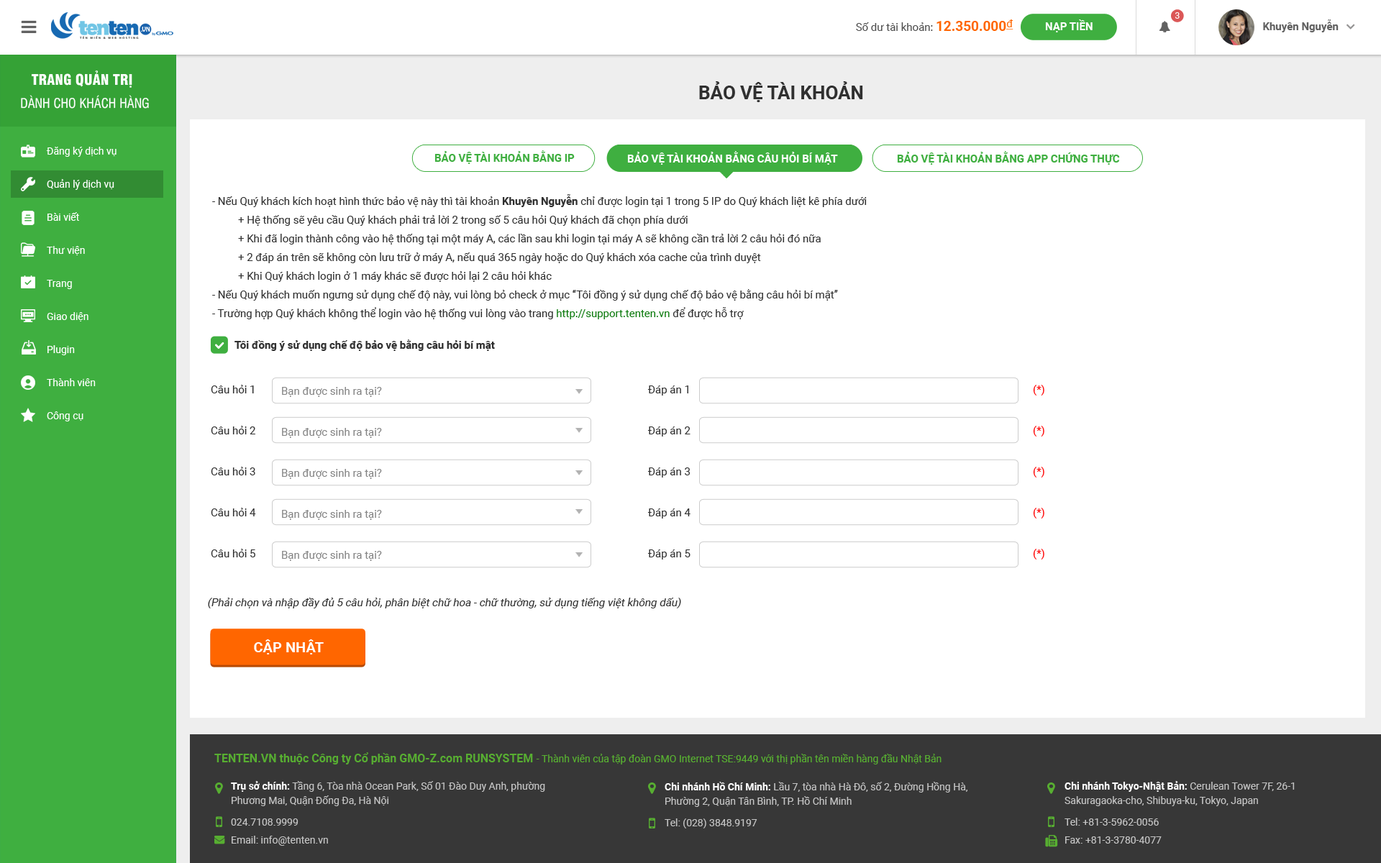
<style>
.page{position:relative;width:1381px;height:863px;background:#ffffff}
.page>*{position:absolute;margin:0}
.t1{font:8.6px "Roboto-Regular";color:#ffffff;text-transform:uppercase}
.t2{font:10.8px "Roboto-Regular";color:#4e4e4e}
.t3{font:13.7px "Roboto-Bold";color:#ff6600}
.t4{font:10.8px "Roboto-Regular";color:#ff6600;text-decoration:underline}
.t5{font:10.8px "Roboto-Bold";color:#ffffff}
.t6{font:10.8px "Roboto-Bold";color:#616161}
.t7{font:14.4px "UTM-Swiss-721-Black-Condensed";color:#ffffff;text-transform:uppercase}
.t8{font:18.7px "Roboto-Bold";color:#303030;text-transform:uppercase}
.t9{font:12.9px "UTM-Swiss-Condensed";color:#ffffff;text-transform:uppercase}
.t10{font:10.1px/33.1px "Roboto-Regular";color:#ffffff}
.t11{font:10.8px "Roboto-Bold";color:#3faf40;text-transform:uppercase}
.t12{font:10.8px "Roboto-Bold";color:#ffffff;text-transform:uppercase}
.t13{font:10.8px/18.7px "Roboto-Regular";color:#303030}
.t14{font:10.8px/18.7px "Roboto-Bold";color:#303030}
.t15{font:10.8px/18.7px "Roboto-Regular";color:#0e7b0f}
.t16{font:10.8px "Roboto-Bold";color:#303030}
.t17{font:10.8px/41px "Roboto-Regular";color:#303030}
.t18{font:10.8px/41px "Roboto-Regular";color:#848484}
.t19{font:10.8px/41px "Roboto-Regular";color:#ff0000}
.t20{font:10.8px "Roboto-Regular";color:#303030;font-style:italic}
.t21{font:14.4px "Roboto-Bold";color:#ffffff;text-transform:uppercase}
.t22{font:10.1px "Roboto-Regular";color:#57ae31}
.t23{font:11.5px "Roboto-Bold";color:#57ae31}
.t24{font:10.1px/14.4px "Roboto-Regular";color:#c4c4c4}
.t25{font:10.1px/14.4px "Roboto-Bold";color:#ffffff}
.t26{font:10.1px/21.6px "Roboto-Regular";color:#c4c4c4}
.t27{font:10.1px/18px "Roboto-Regular";color:#c4c4c4}
</style>
<div class="page">
<p class="t1" style="left:1175px;top:12px;width:5px;height:7px">3</p>
<p class="t2" style="left:856px;top:19px;width:158px;height:12px">Số dư tài khoản: <span class="t3">12.350.000</span><span class="t4">đ</span></p>
<p class="t5" style="left:1045px;top:19px;width:48px;height:13px">NẠP TIỀN</p>
<p class="t6" style="left:1263px;top:19px;width:76px;height:13px">Khuyên Nguyễn</p>
<p class="t7" style="left:32px;top:71px;width:100px;height:17px">Trang quản trị</p>
<p class="t8" style="left:699px;top:81px;width:164px;height:21px">bảo vệ tài khoản</p>
<p class="t9" style="left:21px;top:95px;width:128px;height:14px">Dành cho Khách hàng</p>
<p class="t10" style="left:46px;top:147px;width:71px;height:275px">Đăng ký dịch vụ<br>Quản lý dịch vụ<br>Bài viết<br>Thư viện<br>Trang<br>Giao diện<br>Plugin<br>Thành viên<br>Công cụ</p>
<p class="t11" style="left:435px;top:150px;width:140px;height:14px">bảo vệ tài khoản bằng ip</p>
<p class="t12" style="left:627px;top:151px;width:211px;height:14px">bảo vệ tài khoản bằng câu hỏi bí mật</p>
<p class="t11" style="left:897px;top:151px;width:223px;height:14px">bảo vệ tài khoản bằng app chứng thực</p>
<p class="t13" style="left:212px;top:194px;width:655px;height:125px">- Nếu Quý khách kích hoạt hình thức bảo vệ này thì tài khoản <span class="t14">Khuyên Nguyễn</span> chỉ được login tại 1 trong 5 IP do Quý khách liệt kê phía dưới<br> + Hệ thống sẽ yêu cầu Quý khách phải trả lời 2 trong số 5 câu hỏi Quý khách đã chọn phía dưới<br> + Khi đã login thành công vào hệ thống tại một máy A, các lần sau khi login tại máy A sẽ không cần trả lời 2 câu hỏi đó nữa<br> + 2 đáp án trên sẽ không còn lưu trữ ở máy A, nếu quá 365 ngày hoặc do Quý khách xóa cache của trình duyệt<br> + Khi Quý khách login ở 1 máy khác sẽ được hỏi lại 2 câu hỏi khác<br>- Nếu Quý khách muốn ngưng sử dụng chế độ này, vui lòng bỏ check ở mục “Tôi đồng ý sử dụng chế độ bảo vệ bằng câu hỏi bí mật”<br>- Trường hợp Quý khách không thể login vào hệ thống vui lòng vào trang <span class="t15">http://support.tenten.vn</span> để được hỗ trợ</p>
<p class="t16" style="left:235px;top:340px;width:260px;height:11px">Tôi đồng ý sử dụng chế độ bảo vệ bằng câu hỏi bí mật</p>
<p class="t17" style="left:211px;top:385px;width:45px;height:173px">Câu hỏi 1<br>Câu hỏi 2<br>Câu hỏi 3<br>Câu hỏi 4<br>Câu hỏi 5</p>
<p class="t18" style="left:282px;top:387px;width:100px;height:174px">Bạn được sinh ra tại?<br>Bạn được sinh ra tại?<br>Bạn được sinh ra tại?<br>Bạn được sinh ra tại?<br>Bạn được sinh ra tại?</p>
<p class="t17" style="left:647px;top:386px;width:44px;height:174px">Đáp án 1<br>Đáp án 2<br>Đáp án 3<br>Đáp án 4<br>Đáp án 5</p>
<p class="t19" style="left:1033px;top:385px;width:12px;height:175px">(*)<br>(*)<br>(*)<br>(*)<br>(*)</p>
<p class="t20" style="left:208px;top:598px;width:473px;height:11px">(Phải chọn và nhập đầy đủ 5 câu hỏi, phân biệt chữ hoa - chữ thường, sử dụng tiếng việt không dấu)</p>
<p class="t21" style="left:254px;top:640px;width:70px;height:15px">cập nhật</p>
<p class="t22" style="left:214px;top:753px;width:728px;height:12px"><span class="t23">TENTEN.VN thuộc Công ty Cổ phần GMO-Z.com RUNSYSTEM </span>- Thành viên của tập đoàn GMO Internet TSE:9449 với thị phần tên miền hàng đầu Nhật Bản</p>
<p class="t24" style="left:231px;top:781px;width:314px;height:65px"><span class="t25">Trụ sở chính:</span> Tầng 6, Tòa nhà Ocean Park, Số 01 Đào Duy Anh, phường Phương Mai, Quận Đống Đa, Hà Nội<br><span class="t26">024.7108.9999<br></span><span class="t27">Email: info@tenten.vn</span></p>
<p class="t24" style="left:665px;top:782px;width:303px;height:47px"><span class="t25">Chi nhánh Hồ Chí Minh: </span>Lầu 7, tòa nhà Hà Đô, số 2, Đường Hồng Hà, Phường 2, Quận Tân Bình, TP. Hồ Chí Minh<br><span class="t26">Tel: (028) 3848.9197</span></p>
<p class="t24" style="left:1065px;top:781px;width:230px;height:63px"><span class="t25">Chi nhánh Tokyo-Nhật Bản:</span> Cerulean Tower 7F, 26-1 Sakuragaoka-cho, Shibuya-ku, Tokyo, Japan <br><span class="t26">Tel: +81-3-5962-0056<br></span><span class="t27">Fax: +81-3-3780-4077</span></p>
</div>
